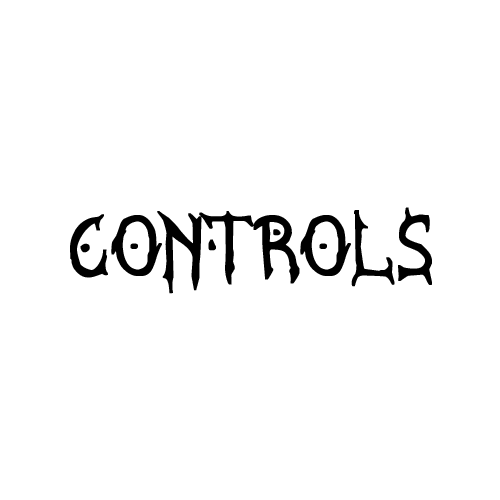
<style>
.page{position:relative;width:500px;height:500px;background:#ffffff}
.page>*{position:absolute;margin:0}
.t1{font:72px "SatanycDemoniacSt";color:#000000;font-weight:bold}
</style>
<div class="page">
<p class="t1" style="left:70px;top:207px;width:362px;height:87px">CONTROLS</p>
</div>
